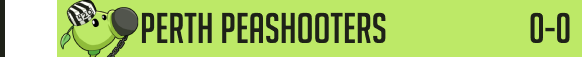
<style>
.page{position:relative;width:582px;height:57px;background:#bde967}
.page>*{position:absolute;margin:0}
.t1{font:42px "BigNoodleTitling";color:#1e2118}
</style>
<div class="page">
<p class="t1" style="left:141px;top:12px;width:245px;height:31px">Perth Peashooters</p>
<p class="t1" style="left:530px;top:12px;width:40px;height:31px">0-0</p>
</div>
